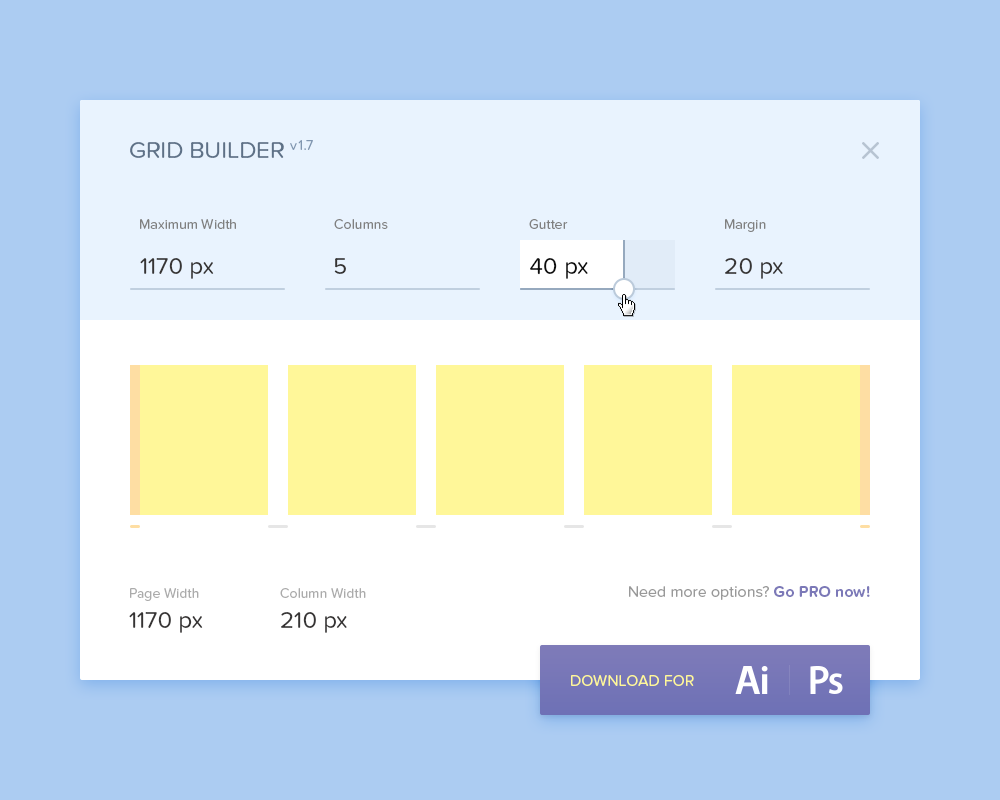
<style>
.page{position:relative;width:1000px;height:800px;background:#acccf2}
.page>*{position:absolute;margin:0}
.t1{font:24px "ProximaNovaSoft-Regular";color:#5e7187;text-transform:uppercase}
.t2{font:24px "ProximaNovaSoft-Regular";letter-spacing:0.05em;color:#8096b0}
.t3{font:24px "ProximaNovaSoft-Regular";letter-spacing:0.05em;color:#8096b0;text-transform:uppercase}
.t4{font:14px "ProximaNovaSoft-Regular";color:#808080}
.t5{font:24px "ProximaNovaSoft-Regular";color:#363434;text-transform:uppercase}
.t6{font:24px "ProximaNovaSoft-Regular";color:#363434}
.t7{font:24px "ProximaNovaSoft-Regular";color:#0d0d0d}
.t8{font:14px/30px "ProximaNovaSoft-Regular";color:#ababab}
.t9{font:24px/30px "ProximaNovaSoft-Regular";color:#363434;text-transform:uppercase}
.t10{font:24px/30px "ProximaNovaSoft-Regular";color:#363434}
.t11{font:16px "ProximaNovaSoft-Regular";color:#999999}
.t12{font:16px "ProximaNovaSoft-Bold";color:#7b79b8}
.t13{font:16px "ProximaNovaSoft-Regular";color:#fff799;text-transform:uppercase}
</style>
<div class="page">
<p class="t1" style="left:130px;top:140px;width:183px;height:18px">Grid Builder <span class="t2">v</span><span class="t3">1.7</span></p>
<p class="t4" style="left:140px;top:219px;width:96px;height:10px">Maximum Width</p>
<p class="t4" style="left:334px;top:219px;width:54px;height:10px">Columns</p>
<p class="t4" style="left:529px;top:219px;width:39px;height:10px">Gutter</p>
<p class="t4" style="left:725px;top:219px;width:41px;height:13px">Margin</p>
<p class="t5" style="left:140px;top:258px;width:74px;height:21px">1170 <span class="t6">px</span></p>
<p class="t5" style="left:334px;top:258px;width:12px;height:16px">5</p>
<p class="t7" style="left:530px;top:258px;width:58px;height:21px">40 px</p>
<p class="t6" style="left:725px;top:258px;width:58px;height:21px">20 px</p>
<p class="t8" style="left:129px;top:588px;width:74px;height:45px">Page Width<br><span class="t9">1170 </span><span class="t10">px</span></p>
<p class="t8" style="left:280px;top:588px;width:86px;height:45px">Column Width<br><span class="t9">210 </span><span class="t10">px</span></p>
<p class="t11" style="left:629px;top:586px;width:241px;height:14px">Need more options? <span class="t12">Go PRO now!</span></p>
<p class="t13" style="left:571px;top:675px;width:123px;height:11px">Download for</p>
</div>
